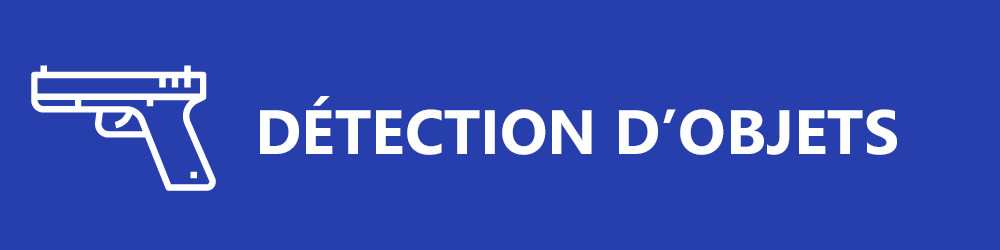
<style>
.page{position:relative;width:1000px;height:250px;background:#273ead}
.page>*{position:absolute;margin:0}
.t1{font:62.5px "SegoeUI-Bold";color:#ffffff}
</style>
<div class="page">
<p class="t1" style="left:260px;top:96px;width:637px;height:59px">DÉTECTION D’OBJETS</p>
</div>
